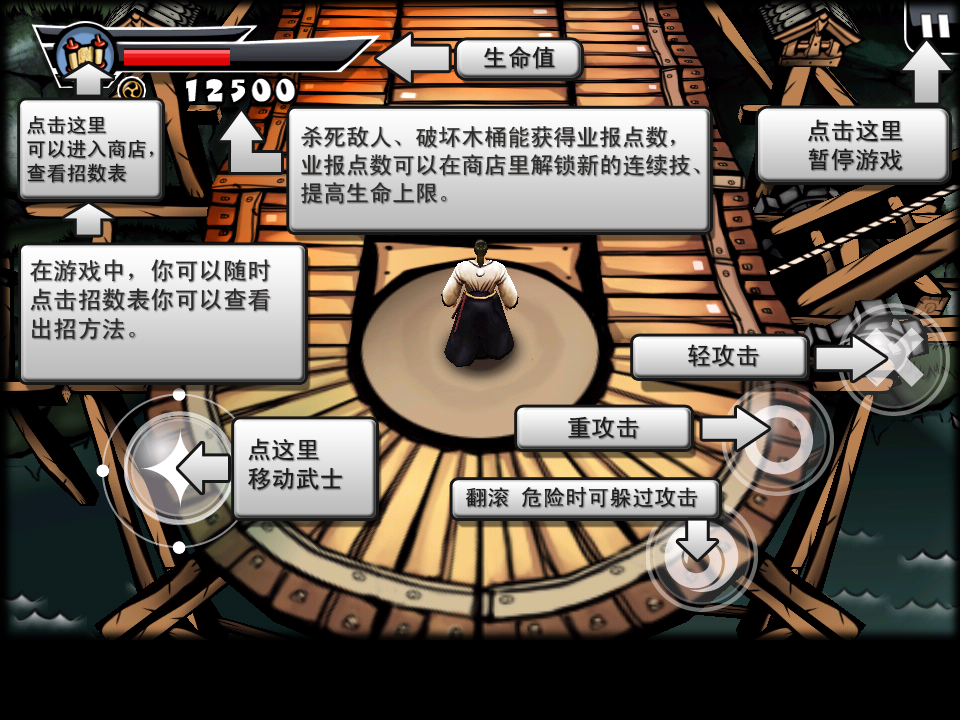
<style>
.page{position:relative;width:960px;height:720px;background:#000000}
.page>*{position:absolute;margin:0}
.t1{font:24px "SimHei";letter-spacing:0.01em;color:#1b1b1b}
.t2{font:20px "SimHei";letter-spacing:0.01em;color:#1b1b1b}
.t3{font:23px "SimHei";color:#2d2b2a}
.t4{font:24px "SimHei";letter-spacing:0.01em;color:#2d2b2a}
.t5{font:22px "SimHei";letter-spacing:0.01em;color:#1b1b1b}
</style>
<div class="page">
<p class="t1" style="left:484px;top:46px;width:71px;height:23px">生命值</p>
<p class="t2" style="left:27px;top:115px;width:126px;height:68px">点击这里<br>可以进入商店，<br>查看招数表</p>
<p class="t3" style="left:301px;top:126px;width:399px;height:78px">杀死敌人、破坏木桶能获得业报点数，<br>业报点数可以在商店里解锁新的连续技、<br>提高生命上限。</p>
<p class="t1" style="left:808px;top:119px;width:94px;height:52px">点击这里<br>  暂停游戏</p>
<p class="t4" style="left:30px;top:259px;width:240px;height:81px">在游戏中，你可以随时<br>点击招数表你可以查看<br>出招方法。</p>
<p class="t1" style="left:688px;top:344px;width:71px;height:23px">轻攻击</p>
<p class="t1" style="left:568px;top:416px;width:71px;height:23px">重攻击</p>
<p class="t1" style="left:248px;top:438px;width:94px;height:52px">点这里<br>移动武士</p>
<p class="t5" style="left:465px;top:486px;width:233px;height:22px">翻滚 危险时可躲过攻击</p>
</div>
